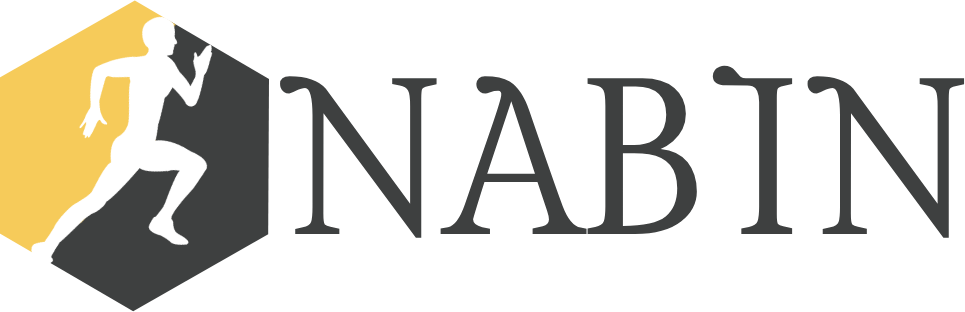
<style>
.page{position:relative;width:965px;height:312px;background:#ffffff}
.page>*{position:absolute;margin:0}
.t1{font:268px "Lancelot";color:#3e4040}
</style>
<div class="page">
<p class="t1" style="left:280px;top:65px;width:685px;height:173px">NABIN</p>
</div>
